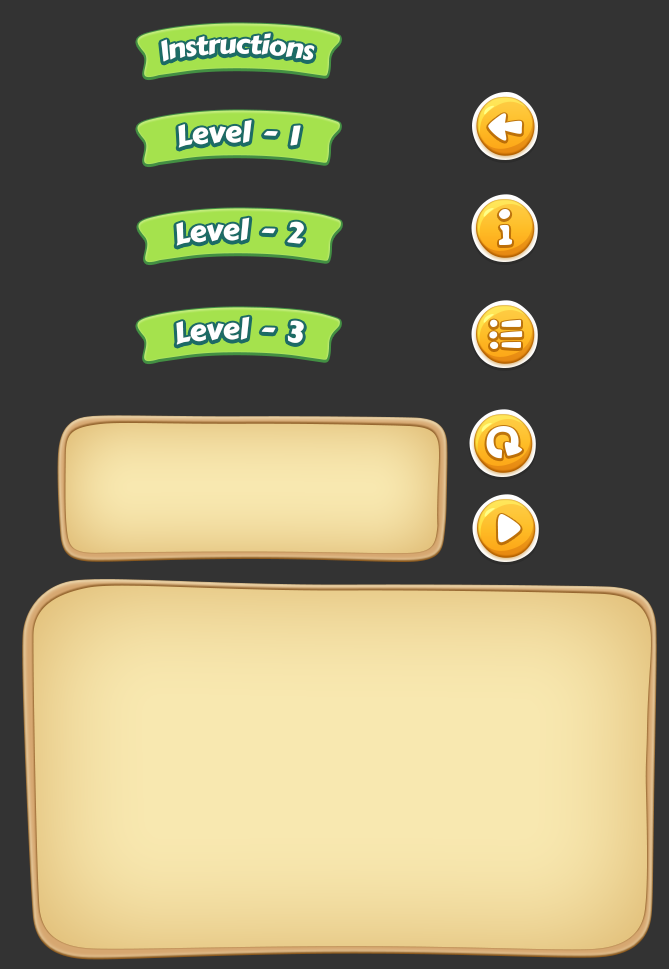
<style>
.page{position:relative;width:669px;height:969px;background:#333333}
.page>*{position:absolute;margin:0}
.t1{font:26px "CarterOne";letter-spacing:-0.02em;color:#ffffff}
.t2{font:30px "CarterOne";letter-spacing:-0.02em;color:#ffffff}
</style>
<div class="page">
<p class="t1" style="left:161px;top:33px;width:154px;height:29px">Instructions</p>
<p class="t2" style="left:178px;top:120px;width:123px;height:28px">Level  -  1</p>
<p class="t2" style="left:176px;top:217px;width:128px;height:29px">Level  -  2</p>
<p class="t2" style="left:176px;top:316px;width:128px;height:29px">Level  -  3</p>
</div>
